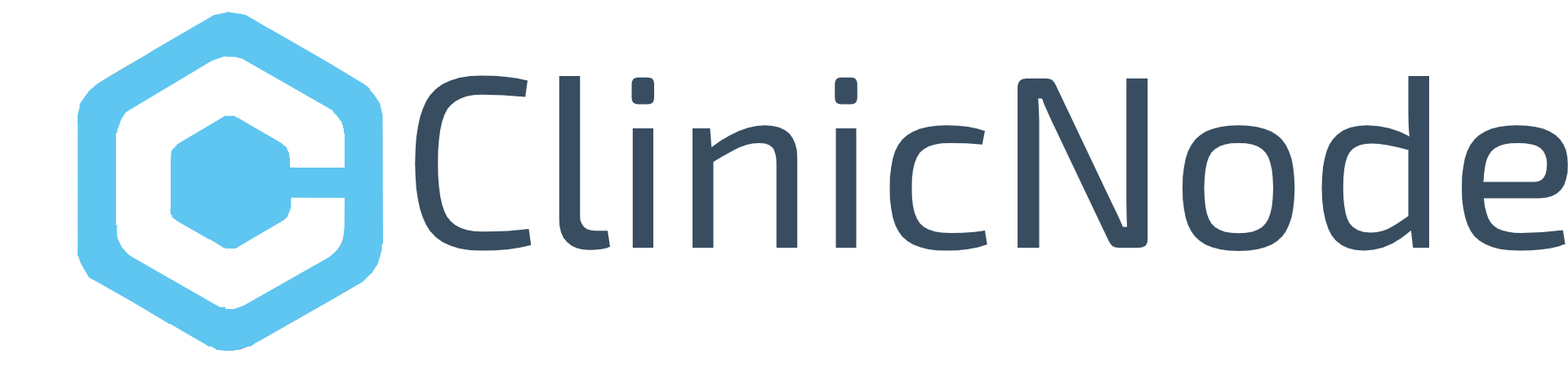
<style>
.page{position:relative;width:1568px;height:372px;background:#ffffff}
.page>*{position:absolute;margin:0}
.t1{font:245px "Exo2-Regular";color:#384d60}
</style>
<div class="page">
<p class="t1" style="left:415px;top:75px;width:1154px;height:176px">ClinicNode</p>
</div>
